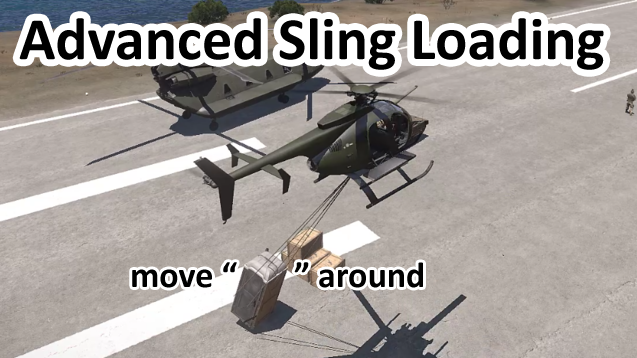
<style>
.page{position:relative;width:637px;height:358px}
.page>*{position:absolute;margin:0}
.t1{font:60px "Calibri-Bold";color:#000000}
.t2{font:36px "Calibri-Bold";color:#000000}
</style>
<div class="page">
<p class="t1" style="left:19px;top:18px;width:585px;height:52px">Advanced Sling Loading</p>
<p class="t2" style="left:132px;top:262px;width:291px;height:26px">move “       ” around</p>
</div>
